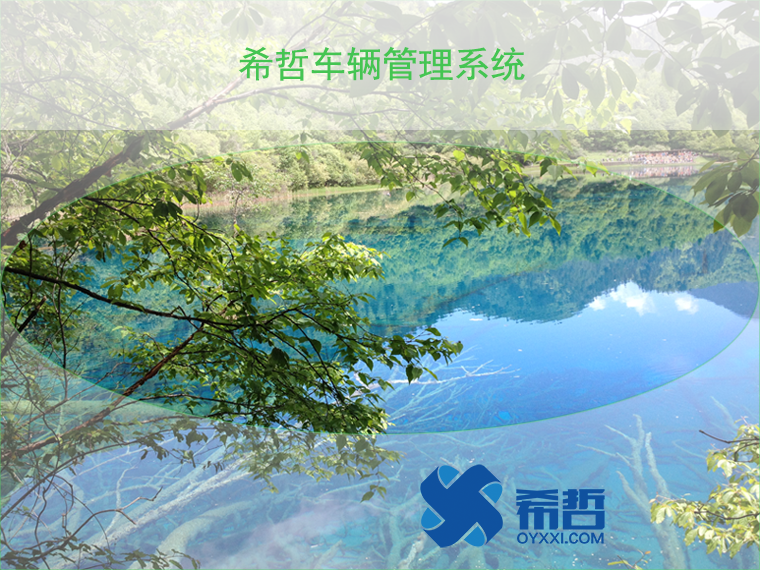
<style>
.page{position:relative;width:760px;height:570px}
.page>*{position:absolute;margin:0}
.t1{font:36px "SimHei";color:#44c552}
</style>
<div class="page">
<p class="t1" style="left:239px;top:46px;width:286px;height:35px">希哲车辆管理系统</p>
</div>
